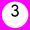
<style>
.page{position:relative;width:30px;height:30px;background:#ffffff}
.page>*{position:absolute;margin:0}
.t1{font:18px "Latha";color:#000000}
</style>
<div class="page">
<p class="t1" style="left:11px;top:4px;width:8px;height:13px">3</p>
</div>
